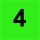
<style>
.page{position:relative;width:40px;height:40px;background:#31ee18}
.page>*{position:absolute;margin:0}
.t1{font:24px "Arial-BoldMT";color:#000000}
</style>
<div class="page">
<p class="t1" style="left:13px;top:9px;width:13px;height:18px">4</p>
</div>
